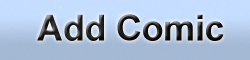
<style>
.page{position:relative;width:250px;height:60px}
.page>*{position:absolute;margin:0}
.t1{font:36px "Arial-BoldMT";letter-spacing:-0.01em}
</style>
<div class="page">
<p class="t1" style="left:37px;top:14px;width:187px;height:27px">Add Comic</p>
</div>
